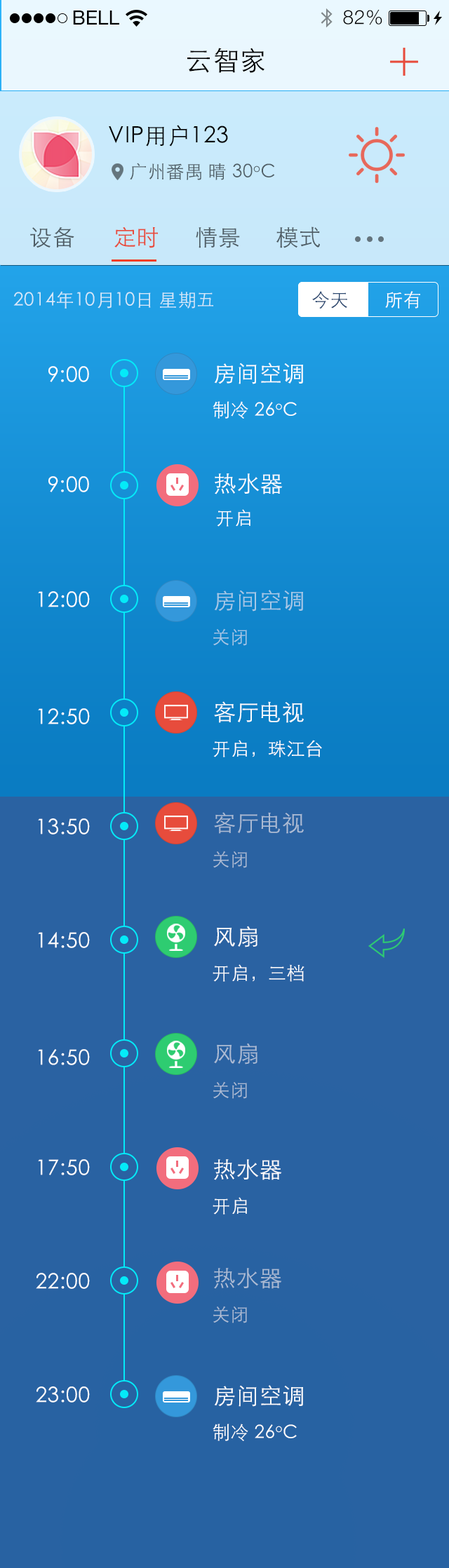
<style>
.page{position:relative;width:449px;height:1568px}
.page>*{position:absolute;margin:0}
.t1{font:19.6px "HelveticaNeue";color:#000000;text-transform:uppercase}
.t2{font:19.6px "HelveticaNeue-Light";letter-spacing:0.025em;color:#000000}
.t3{font:26.6px "STHeitiSC-Light";letter-spacing:0.025em;color:#000000}
.t4{font:22.4px "STHeitiSC-Light";letter-spacing:0.025em;color:#000000}
.t5{font:18.2px "STHeitiSC-Light";letter-spacing:0.025em;color:#4f5e65}
.t6{font:22.4px "STHeitiSC-Light";letter-spacing:0.025em;color:#4f5d65}
.t7{font:22.4px "STHeitiSC-Light";letter-spacing:0.025em;color:#e74c3c}
.t8{font:18.2px "STHeitiSC-Light";letter-spacing:0.025em;color:#d6e9f9}
.t9{font:18.2px "STHeitiSC-Light";letter-spacing:0.025em;color:#2a4870}
.t10{font:18.2px "STHeitiSC-Light";letter-spacing:0.025em;color:#ffffff}
.t11{font:22.4px "STHeitiSC-Light";letter-spacing:0.025em;color:#ffffff}
.t12{font:21px "STHeitiSC-Light";letter-spacing:0.025em;color:#ffffff}
.t13{font:22.4px "STHeitiSC-Light";letter-spacing:0.025em;color:#a6c9e7}
.t14{font:18.2px "STHeitiSC-Light";letter-spacing:0.025em;color:#a6c8e6}
.t15{font:22.4px "STHeitiSC-Light";letter-spacing:0.025em;color:#abbbd4}
.t16{font:18.2px "STHeitiSC-Light";letter-spacing:0.025em;color:#abbbd4}
</style>
<div class="page">
<p class="t1" style="left:73px;top:11px;width:46px;height:14px">Bell</p>
<p class="t2" style="left:343px;top:10px;width:39px;height:15px">82%</p>
<p class="t3" style="left:187px;top:48px;width:78px;height:25px">云智家</p>
<p class="t4" style="left:109px;top:125px;width:119px;height:22px">VIP用户123</p>
<p class="t5" style="left:130px;top:163px;width:145px;height:17px">广州番禺 晴 30oC</p>
<p class="t6" style="left:30px;top:227px;width:44px;height:21px">设备</p>
<p class="t7" style="left:114px;top:227px;width:44px;height:21px">定时</p>
<p class="t6" style="left:196px;top:227px;width:44px;height:21px">情景</p>
<p class="t6" style="left:276px;top:227px;width:44px;height:21px">模式</p>
<p class="t8" style="left:13px;top:291px;width:200px;height:18px">2014年10月10日 星期五</p>
<p class="t9" style="left:312px;top:291px;width:35px;height:18px">今天</p>
<p class="t10" style="left:385px;top:291px;width:35px;height:18px">所有</p>
<p class="t11" style="left:214px;top:363px;width:89px;height:21px">房间空调</p>
<p class="t12" style="left:48px;top:366px;width:41px;height:16px">9:00</p>
<p class="t10" style="left:212px;top:401px;width:85px;height:18px">制冷 26oC</p>
<p class="t11" style="left:215px;top:473px;width:68px;height:21px">热水器</p>
<p class="t12" style="left:48px;top:476px;width:41px;height:16px">9:00</p>
<p class="t10" style="left:216px;top:509px;width:34px;height:18px">开启</p>
<p class="t12" style="left:38px;top:591px;width:52px;height:16px">12:00</p>
<p class="t13" style="left:214px;top:590px;width:89px;height:21px">房间空调</p>
<p class="t14" style="left:213px;top:628px;width:34px;height:18px">关闭</p>
<p class="t11" style="left:214px;top:701px;width:90px;height:22px">客厅电视</p>
<p class="t12" style="left:38px;top:708px;width:52px;height:16px">12:50</p>
<p class="t10" style="left:212px;top:740px;width:110px;height:17px">开启，珠江台</p>
<p class="t12" style="left:38px;top:818px;width:52px;height:16px">13:50</p>
<p class="t15" style="left:214px;top:812px;width:90px;height:22px">客厅电视</p>
<p class="t16" style="left:213px;top:851px;width:34px;height:17px">关闭</p>
<p class="t11" style="left:214px;top:926px;width:43px;height:21px">风扇</p>
<p class="t12" style="left:38px;top:932px;width:52px;height:16px">14:50</p>
<p class="t10" style="left:212px;top:964px;width:92px;height:18px">开启，三档</p>
<p class="t12" style="left:38px;top:1049px;width:52px;height:16px">16:50</p>
<p class="t15" style="left:214px;top:1043px;width:43px;height:22px">风扇</p>
<p class="t16" style="left:213px;top:1081px;width:34px;height:18px">关闭</p>
<p class="t12" style="left:38px;top:1159px;width:52px;height:16px">17:50</p>
<p class="t11" style="left:214px;top:1159px;width:68px;height:21px">热水器</p>
<p class="t10" style="left:212px;top:1197px;width:35px;height:18px">开启</p>
<p class="t12" style="left:36px;top:1273px;width:54px;height:16px">22:00</p>
<p class="t15" style="left:214px;top:1268px;width:68px;height:21px">热水器</p>
<p class="t16" style="left:213px;top:1306px;width:34px;height:17px">关闭</p>
<p class="t11" style="left:214px;top:1385px;width:89px;height:22px">房间空调</p>
<p class="t12" style="left:36px;top:1386px;width:54px;height:17px">23:00</p>
<p class="t10" style="left:212px;top:1424px;width:85px;height:17px">制冷 26oC</p>
</div>
